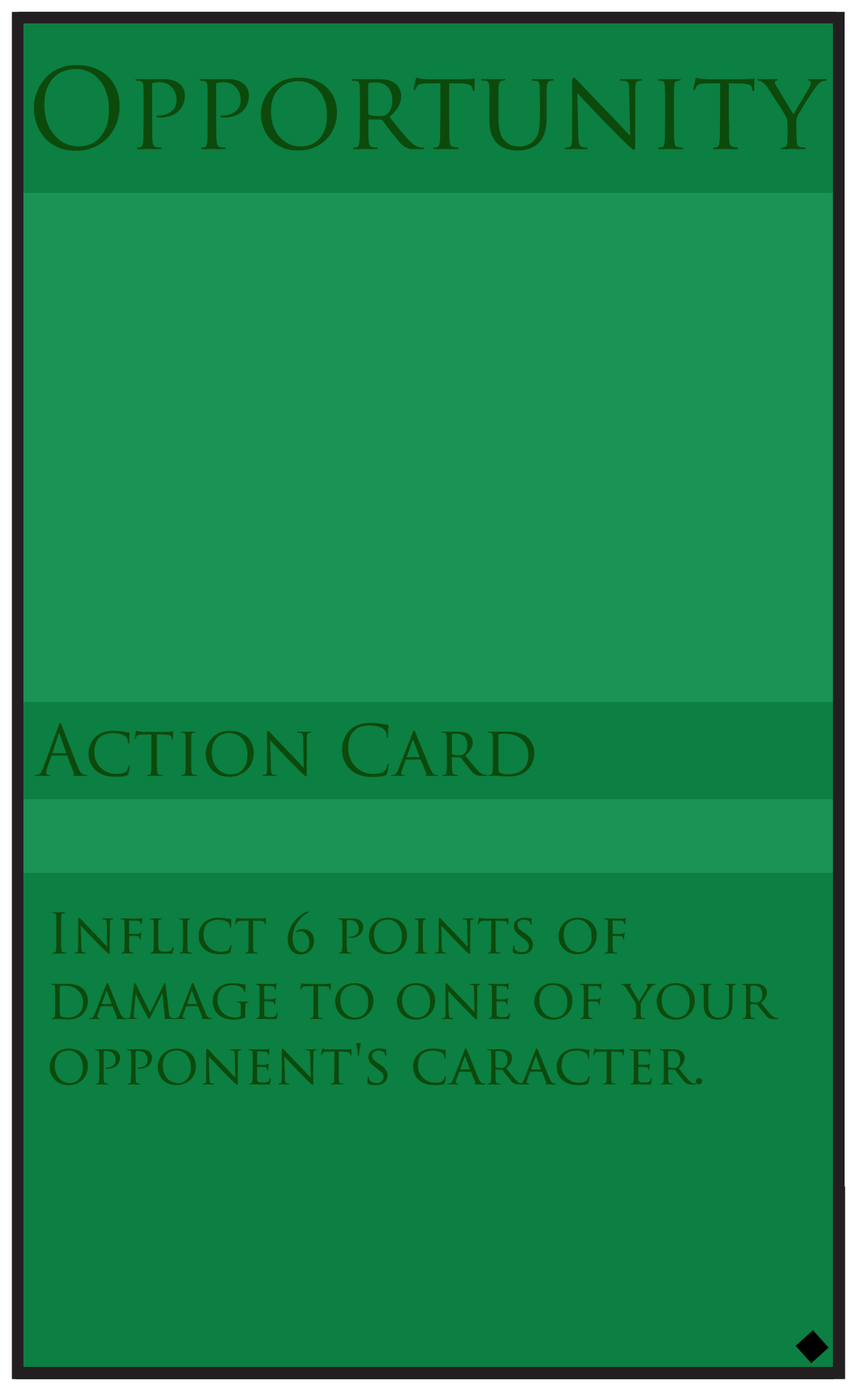
<style>
.page{position:relative;width:857px;height:1391px;background:#0c7f42}
.page>*{position:absolute;margin:0}
.t1{font:109.1px "TrajanPro-Regular";color:#0c4a0c}
.t2{font:68.9px "TrajanPro-Regular";color:#0c4a0c}
.t3{font:54.5px "TrajanPro-Regular";color:#0c4a0c}
</style>
<div class="page">
<p class="t1" style="left:34px;top:65px;width:793px;height:86px">Opportunity</p>
<p class="t2" style="left:34px;top:723px;width:501px;height:54px">Action Card</p>
<p class="t3" style="left:50px;top:912px;width:729px;height:173px">Inflict 6 points of <br>damage to one of your <br>opponent's caracter.</p>
</div>
